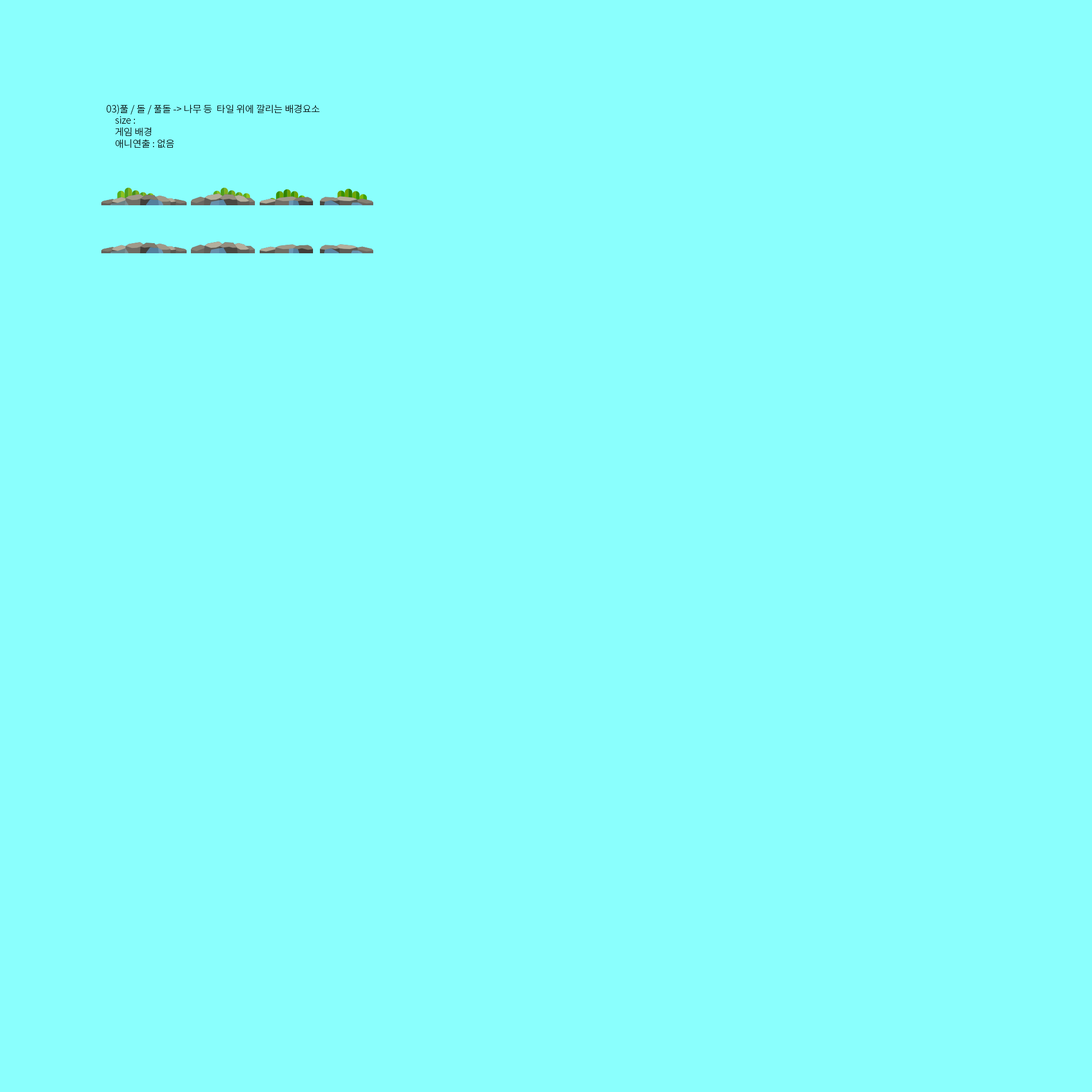
<style>
.page{position:relative;width:1092px;height:1092px;background:#8afffd}
.page>*{position:absolute;margin:0}
.t1{font:9.6px "NotoSansCJKkr-Light";color:#000000}
</style>
<div class="page">
<p class="t1" style="left:107px;top:104px;width:213px;height:44px">03)풀 / 돌 / 풀돌 -&gt; 나무 등  타일 위에 깔리는 배경요소<br>    size :   <br>    게임 배경<br>    애니연출 : 없음</p>
</div>
